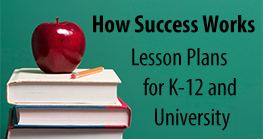
<style>
.page{position:relative;width:263px;height:139px}
.page>*{position:absolute;margin:0}
.t1{font:25px "MyriadPro-BoldCond";color:#000000}
.t2{font:25px "MyriadPro-Cond";color:#000000}
</style>
<div class="page">
<p class="t1" style="left:93px;top:15px;width:162px;height:18px">How Success Works</p>
<p class="t2" style="left:132px;top:48px;width:104px;height:83px">Lesson Plans<br> for K-12 and<br>  University</p>
</div>
